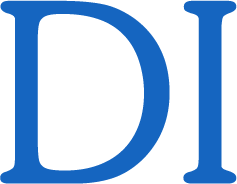
<style>
.page{position:relative;width:237px;height:184px;background:#ffffff}
.page>*{position:absolute;margin:0}
.t1{font:689.5px "JasmineUPC";color:#1565c0}
</style>
<div class="page">
<p class="t1" style="left:0px;top:0px;width:237px;height:184px">DI</p>
</div>
